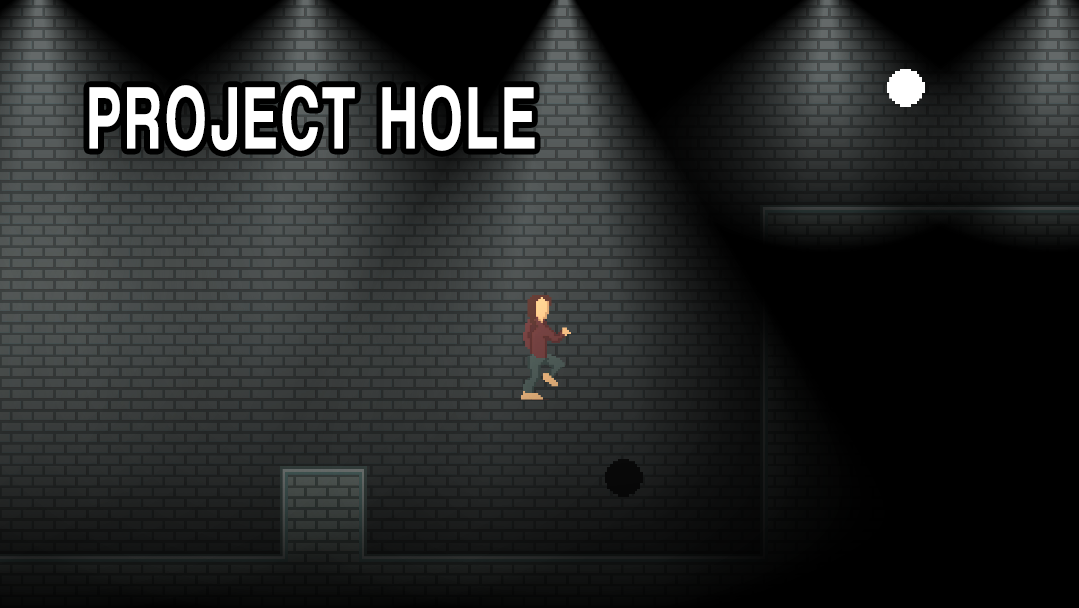
<style>
.page{position:relative;width:1079px;height:608px;background:#000000}
.page>*{position:absolute;margin:0}
.t1{font:91.9px "CoolveticaRg-Regular";letter-spacing:0.1em;color:#ffffff;scale:0.64 1}
</style>
<div class="page">
<p class="t1" style="left:89px;top:85px;width:446px;height:66px">PROJECT HOLE</p>
</div>
